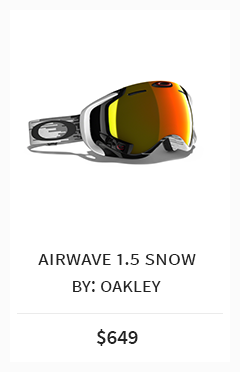
<style>
.page{position:relative;width:240px;height:372px;background:#ffffff}
.page>*{position:absolute;margin:0}
.t1{font:22.2px "SourceSansPro-Regular";color:#232323;font-variant:small-caps}
.t2{font:20.8px "SourceSansPro-Regular";color:#232323;font-variant:small-caps}
.t3{font:20.6px "SourceSansPro-Semibold";color:#232323}
</style>
<div class="page">
<p class="t1" style="left:38px;top:254px;width:158px;height:11px">airwave 1.5 snow</p>
<p class="t2" style="left:73px;top:281px;width:88px;height:11px">by: oakley</p>
<p class="t3" style="left:96px;top:329px;width:42px;height:17px">$649</p>
</div>
